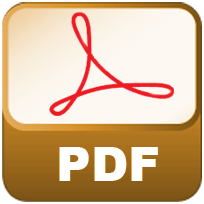
<style>
.page{position:relative;width:204px;height:204px}
.page>*{position:absolute;margin:0}
.t1{font:48px "Arial-Black";color:#ffffff}
</style>
<div class="page">
<p class="t1" style="left:59px;top:147px;width:99px;height:34px">PDF</p>
</div>
